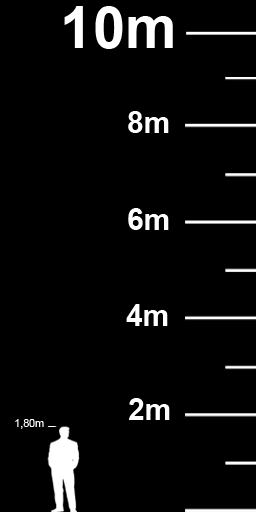
<style>
.page{position:relative;width:256px;height:512px;background:#000000}
.page>*{position:absolute;margin:0}
.t1{font:58.2px "Arial-BoldMT";color:#ffffff}
.t2{font:29.9px "Arial-BoldMT";color:#ffffff}
.t3{font:10.6px "ArialMT";color:#ffffff}
</style>
<div class="page">
<p class="t1" style="left:64px;top:6px;width:109px;height:43px">10m</p>
<p class="t2" style="left:128px;top:111px;width:41px;height:22px">8m</p>
<p class="t2" style="left:128px;top:208px;width:41px;height:22px">6m</p>
<p class="t2" style="left:126px;top:304px;width:42px;height:22px">4m</p>
<p class="t2" style="left:128px;top:398px;width:42px;height:22px">2m</p>
<p class="t3" style="left:15px;top:419px;width:29px;height:10px">1,80m</p>
</div>
